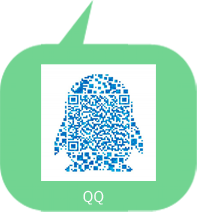
<style>
.page{position:relative;width:197px;height:212px;background:#72d491}
.page>*{position:absolute;margin:0}
.t1{font:16px "WenQuanYiZenHei";letter-spacing:0.015em;color:#fafbfa}
</style>
<div class="page">
<p class="t1" style="left:83px;top:190px;width:21px;height:15px">QQ</p>
</div>
